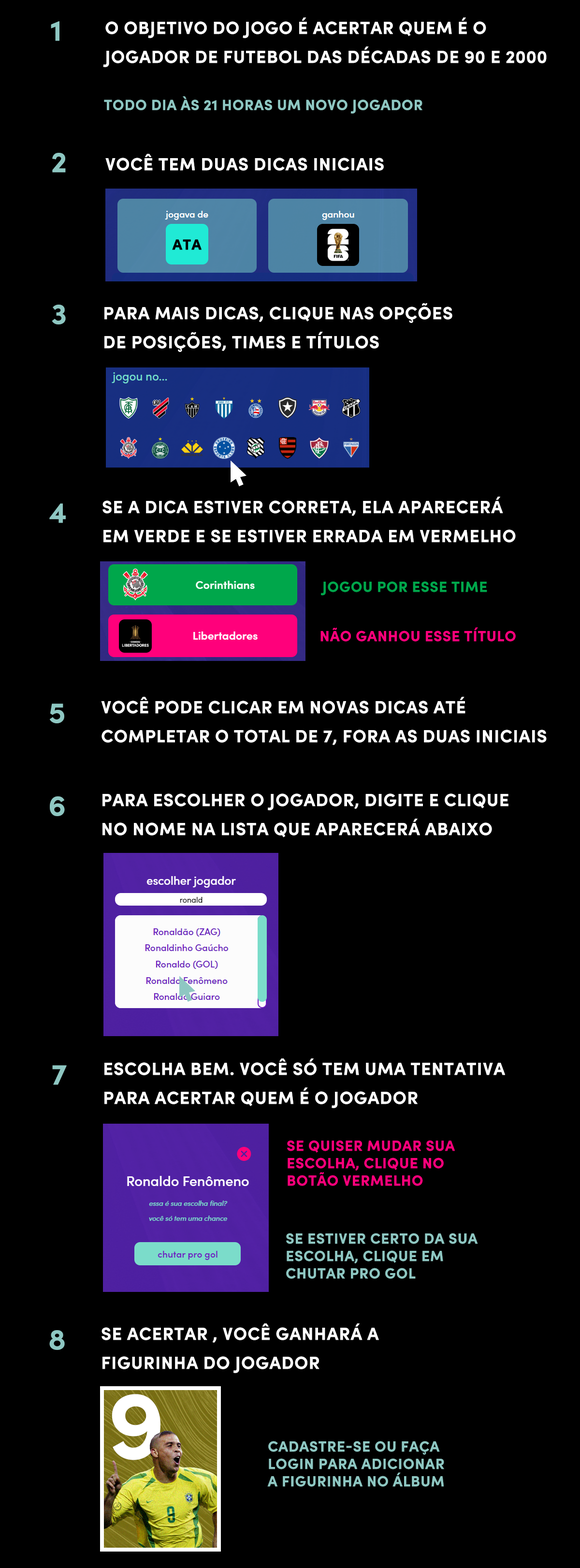
<style>
.page{position:relative;width:580px;height:1568px;background:#000000}
.page>*{position:absolute;margin:0}
.t1{font:17.4px/29px "SofiaPro-Bold";color:#ffffff;text-transform:uppercase;font-weight:bold}
.t2{font:29px "SofiaPro-Bold";color:#8ec7c2;text-transform:uppercase;font-weight:bold}
.t3{font:14.5px "SofiaPro-Bold";color:#8ec7c2;text-transform:uppercase;font-weight:bold}
.t4{font:17.4px "SofiaPro-Bold";color:#ffffff;text-transform:uppercase;font-weight:bold}
.t5{font:14.5px "SofiaPro-Bold";color:#00a74b;text-transform:uppercase;font-weight:bold}
.t6{font:14.5px "SofiaPro-Bold";color:#ff007b;text-transform:uppercase;font-weight:bold}
</style>
<div class="page">
<p class="t1" style="left:103px;top:17px;width:444px;height:50px">o objetivo DO JOGO é acertar quem é o <br>jogador de futebol das décadaS de 90 e 2000</p>
<p class="t2" style="left:51px;top:21px;width:8px;height:20px">1</p>
<p class="t3" style="left:104px;top:96px;width:319px;height:18px">TODO DIA ÀS 21 HORAS UM NOVO JOGADOR</p>
<p class="t2" style="left:52px;top:153px;width:14px;height:20px">2</p>
<p class="t4" style="left:105px;top:154px;width:279px;height:17px">vocÊ tem duas dicas iniciais</p>
<p class="t2" style="left:52px;top:305px;width:14px;height:19px">3</p>
<p class="t1" style="left:104px;top:303px;width:349px;height:49px">para mais dicas, clique nas opções <br>de posições, times e títulos</p>
<p class="t1" style="left:103px;top:497px;width:413px;height:45px">SE A DICA ESTIVER CORRETA, ELA APARECERÁ<br>EM VERDE E SE ESTIVER ERRADA EM VERMELHO</p>
<p class="t2" style="left:49px;top:503px;width:17px;height:20px">4</p>
<p class="t5" style="left:321px;top:581px;width:166px;height:15px">jogou por esse time</p>
<p class="t6" style="left:321px;top:627px;width:195px;height:15px">nÃO GANHOU ESSE TÍTULO</p>
<p class="t1" style="left:101px;top:697px;width:446px;height:48px">vOCÊ PODE clicAR EM NOVAS DICAS ATÉ <br>COMPLETAR o total de 7, fora as duas iniciais</p>
<p class="t2" style="left:50px;top:703px;width:14px;height:20px">5</p>
<p class="t2" style="left:50px;top:796px;width:15px;height:20px">6</p>
<p class="t1" style="left:103px;top:793px;width:406px;height:44px">para escolher o jogador, digite e clique <br>no nome na lista que aparecerá abaixo</p>
<p class="t1" style="left:104px;top:1058px;width:401px;height:50px">escolha bem. você só tem uma tentativa<br>para acertar quem é o jogador</p>
<p class="t2" style="left:52px;top:1065px;width:15px;height:20px">7</p>
<p class="t6" style="left:287px;top:1140px;width:168px;height:46px">se quiser mudar sua <br>escolha, clique no <br>botão vermelho</p>
<p class="t3" style="left:286px;top:1233px;width:192px;height:46px">se estiver certo da sua<br>escolha, clique em <br>chutar pro gol</p>
<p class="t1" style="left:102px;top:1323px;width:277px;height:50px">se acertar , você ganhará a <br>figurinha do jogador</p>
<p class="t2" style="left:49px;top:1330px;width:16px;height:20px">8</p>
<p class="t3" style="left:267px;top:1441px;width:177px;height:46px">CADASTRE-SE OU FAÇA <br>LOGIN PARA ADICIONAR<br>A FIGURINHA NO ÁLBUM</p>
</div>
